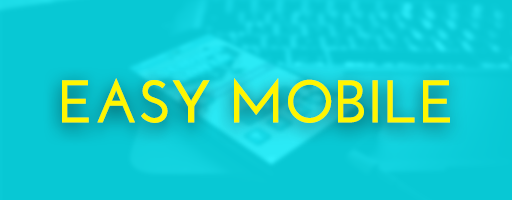
<style>
.page{position:relative;width:512px;height:200px;background:#08c8d4}
.page>*{position:absolute;margin:0}
.t1{font:60px "JosefinSans-Bold";color:#fff600}
</style>
<div class="page">
<p class="t1" style="left:62px;top:78px;width:388px;height:45px">EASY MOBILE</p>
</div>
